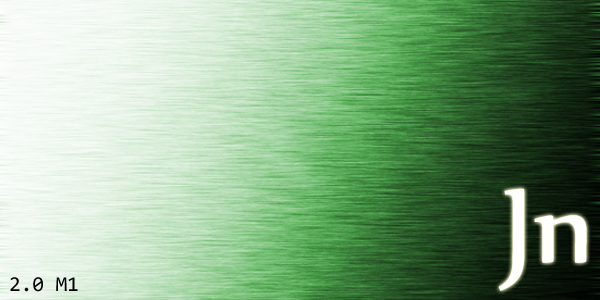
<style>
.page{position:relative;width:600px;height:300px}
.page>*{position:absolute;margin:0}
.t1{font:127px "Nyala-Regular";color:#ffffff}
.t2{font:21.2px "Consolas";color:#000000}
</style>
<div class="page">
<p class="t1" style="left:498px;top:188px;width:89px;height:103px">Jn</p>
<p class="t2" style="left:10px;top:277px;width:68px;height:15px">2.0 M1</p>
</div>
